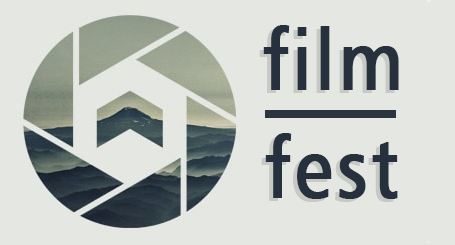
<style>
.page{position:relative;width:455px;height:245px;background:#e5e7e2}
.page>*{position:absolute;margin:0}
.t1{font:84.2px "Humanist777BT-RomanB";letter-spacing:0.04em;color:#27313d;font-weight:bold;scale:0.85 1}
</style>
<div class="page">
<p class="t1" style="left:263px;top:25px;width:136px;height:65px">film</p>
<p class="t1" style="left:265px;top:133px;width:133px;height:66px">fest</p>
</div>
